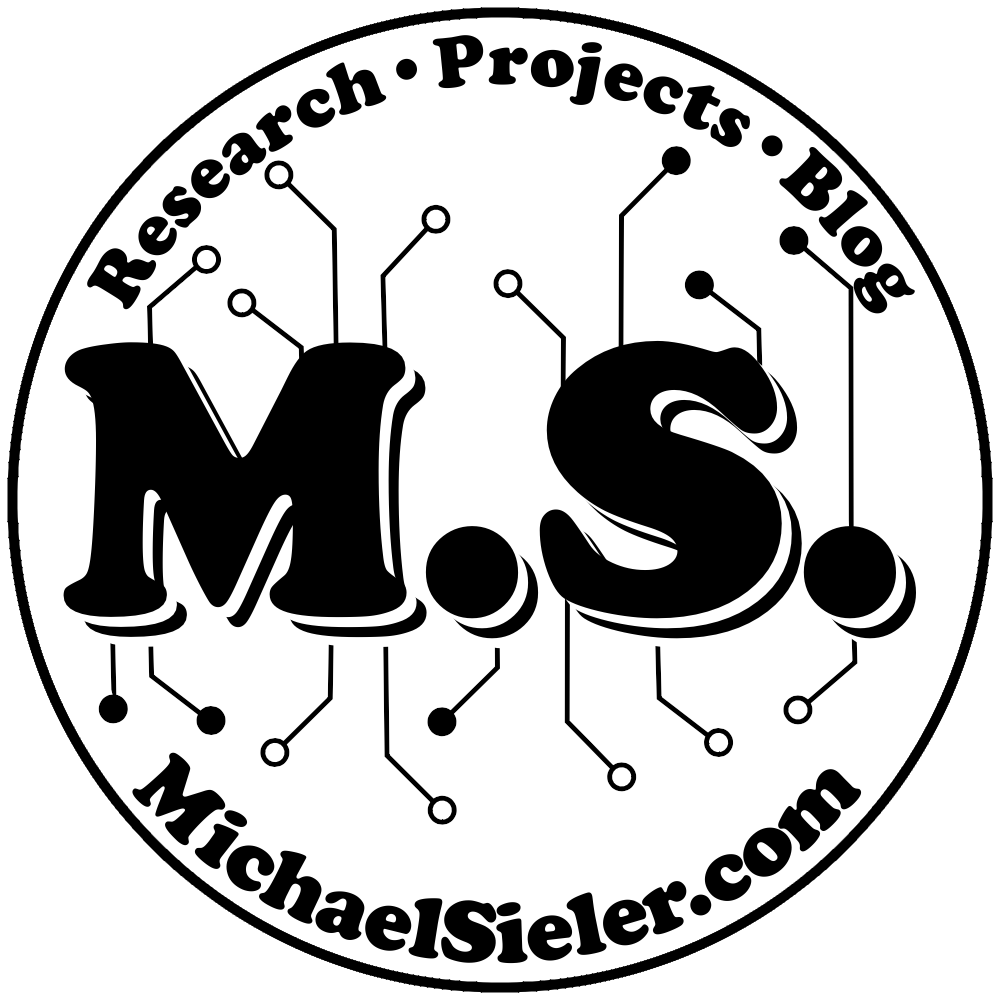
<style>
.page{position:relative;width:1000px;height:1000px;background:#ffffff}
.page>*{position:absolute;margin:0}
.t1{font:75px "CooperBlack";color:#000000}
.t2{font:400px "CooperBlack";color:#000000}
.t3{font:90px "CooperBlack";color:#000000}
</style>
<div class="page">
<p class="t1" style="left:86px;top:34px;width:830px;height:280px;rotate:-180deg">Research•Projects•Blog</p>
<p class="t2" style="left:63px;top:340px;width:834px;height:279px">M.S.</p>
<p class="t2" style="left:73px;top:350px;width:834px;height:279px">M.S.</p>
<p class="t2" style="left:83px;top:360px;width:834px;height:279px">M.S.</p>
<p class="t2" style="left:93px;top:370px;width:834px;height:279px">M.S.</p>
<p class="t3" style="left:130px;top:752px;width:734px;height:212px;text-align:center">M ichaelSieler.com</p>
<p class="t3" style="left:131px;top:755px;width:734px;height:212px;text-align:center">M ichaelSieler.com</p>
</div>
